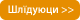
<style>
.page{position:relative;width:80px;height:20px;background:#e68d00}
.page>*{position:absolute;margin:0}
.t1{font:11px "MyriadPro-Semibold";color:#ffffff}
</style>
<div class="page">
<p class="t1" style="left:8px;top:5px;width:66px;height:11px">Шлїдуюци &gt;&gt;</p>
</div>
